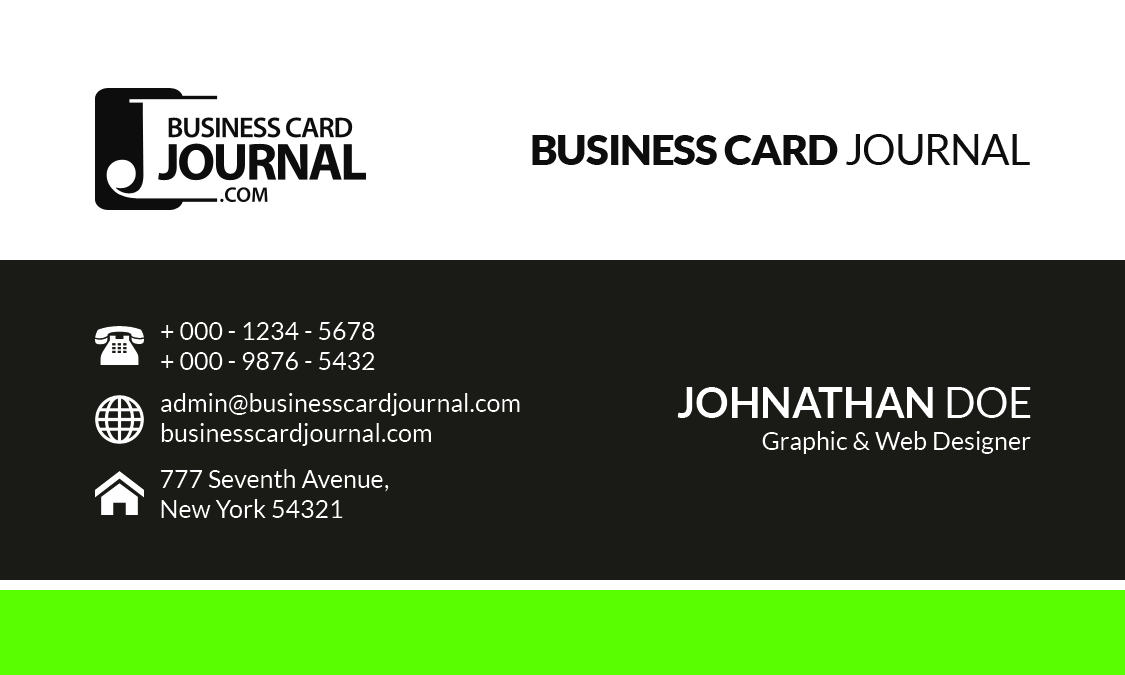
<style>
.page{position:relative;width:1125px;height:675px;background:#1a1a17}
.page>*{position:absolute;margin:0}
.t1{font:41.7px "Lato-Black";letter-spacing:-0.02em;color:#0d0d0d;text-transform:uppercase}
.t2{font:41.7px "Lato-Regular";letter-spacing:-0.02em;color:#0d0d0d;text-transform:uppercase}
.t3{font:25px "Lato-Regular";color:#ffffff}
.t4{font:41.7px "Lato-Bold";color:#ffffff;text-transform:uppercase}
.t5{font:41.7px "Lato-Regular";color:#ffffff;text-transform:uppercase}
</style>
<div class="page">
<p class="t1" style="left:532px;top:134px;width:498px;height:31px">Business Card <span class="t2">Journal</span></p>
<p class="t3" style="left:161px;top:322px;width:214px;height:48px">+ 000 - 1234 - 5678<br>+ 000 - 9876 - 5432</p>
<p class="t4" style="left:677px;top:387px;width:354px;height:31px">JOHNATHAN <span class="t5">DOE</span></p>
<p class="t3" style="left:161px;top:393px;width:359px;height:53px">admin@businesscardjournal.com<br>businesscardjournal.com</p>
<p class="t3" style="left:762px;top:431px;width:269px;height:23px">Graphic &amp; Web Designer</p>
<p class="t3" style="left:160px;top:469px;width:229px;height:49px">777 Seventh Avenue,<br>New York 54321</p>
</div>
